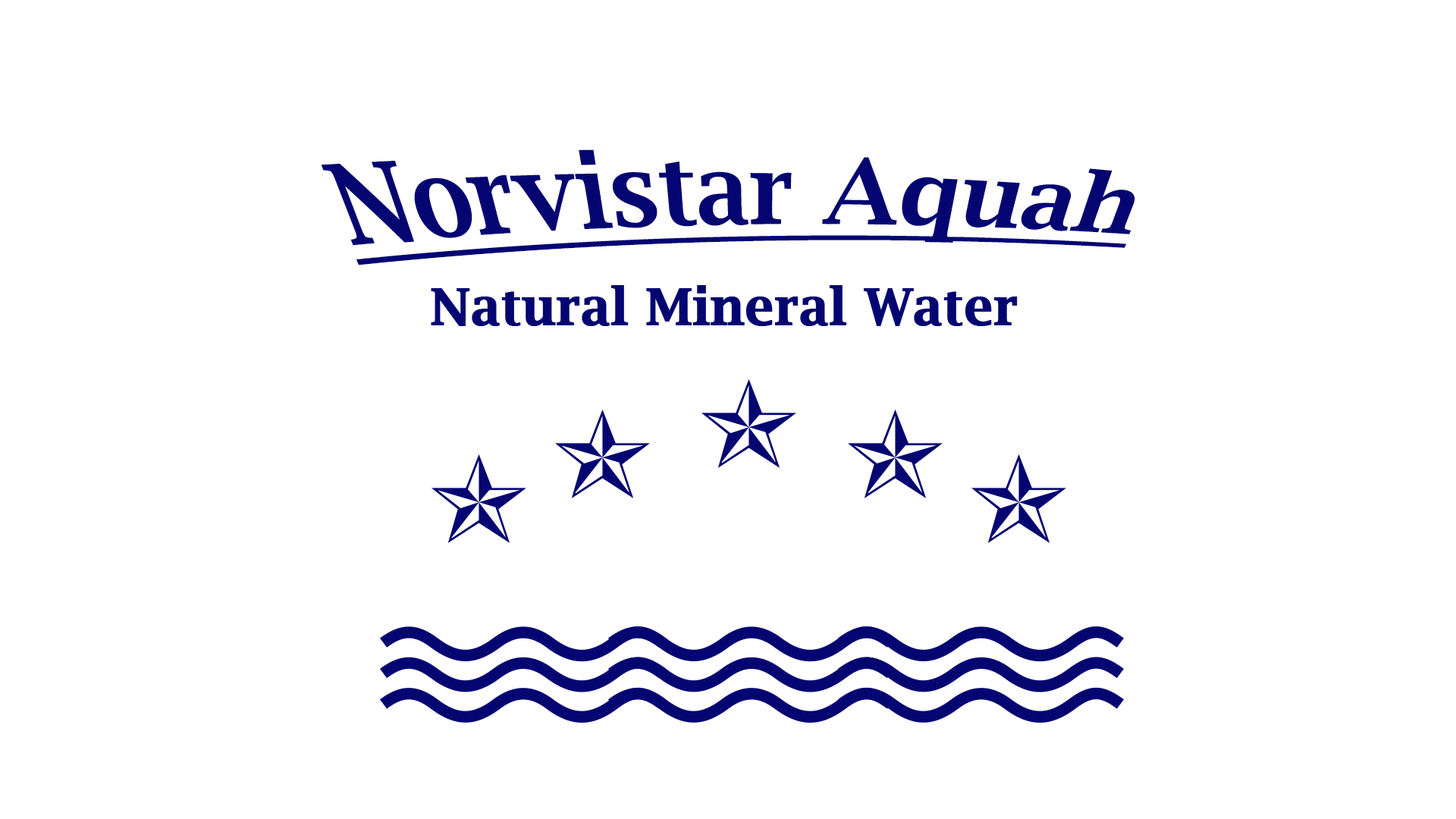
<style>
.page{position:relative;width:1456px;height:819px;background:#ffffff}
.page>*{position:absolute;margin:0}
.t1{font:94.8px "LucidaBright-Demi";color:#050572;text-decoration:underline}
.t2{font:96.4px "LucidaBright-Demi";text-decoration:underline}
.t3{font:50.6px "LucidaBright-Demi";color:#050572;font-weight:bold}
</style>
<div class="page">
<p class="t1" style="left:321px;top:149px;width:814px;height:116px">Norvistar Aquah</p>
<p class="t2" style="left:322px;top:151px;width:825px;height:114px">Norvistar Aquah</p>
<p class="t3" style="left:431px;top:285px;width:587px;height:41px">Natural Mineral Water</p>
</div>
